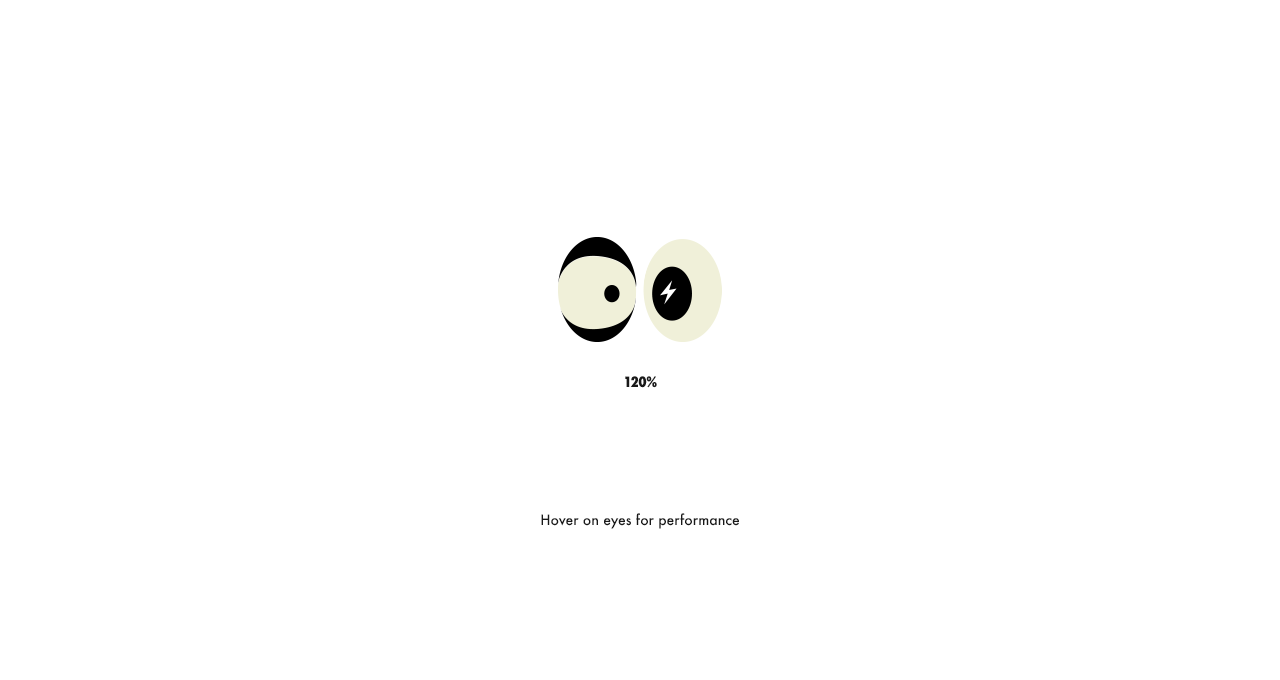
<style>
.page{position:relative;width:1280px;height:680px;background:#ffffff}
.page>*{position:absolute;margin:0}
.t1{font:14px "Futura-CondensedExtraBold";letter-spacing:-0.025em;color:#191919}
.t2{font:14px "Futura-Medium";color:#191919}
</style>
<div class="page">
<p class="t1" style="left:625px;top:376px;width:32px;height:12px">120%</p>
<p class="t2" style="left:541px;top:513px;width:198px;height:16px">Hover on eyes for performance</p>
</div>
